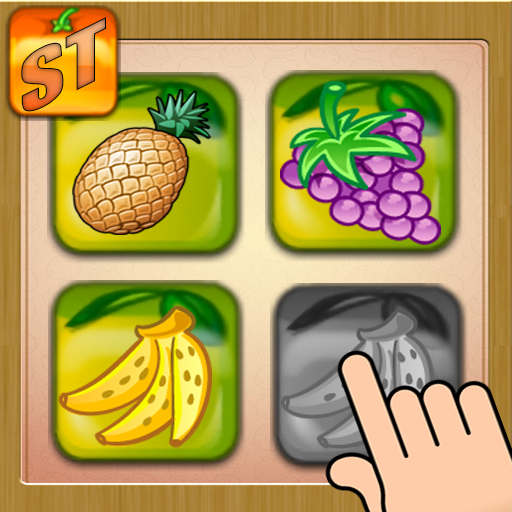
<style>
.page{position:relative;width:512px;height:512px}
.page>*{position:absolute;margin:0}
.t1{font:74.1px "Impact";scale:1.35 1}
</style>
<div class="page">
<p class="t1" style="left:21px;top:17px;width:85px;height:95px;rotate:-26deg">ST</p>
</div>
